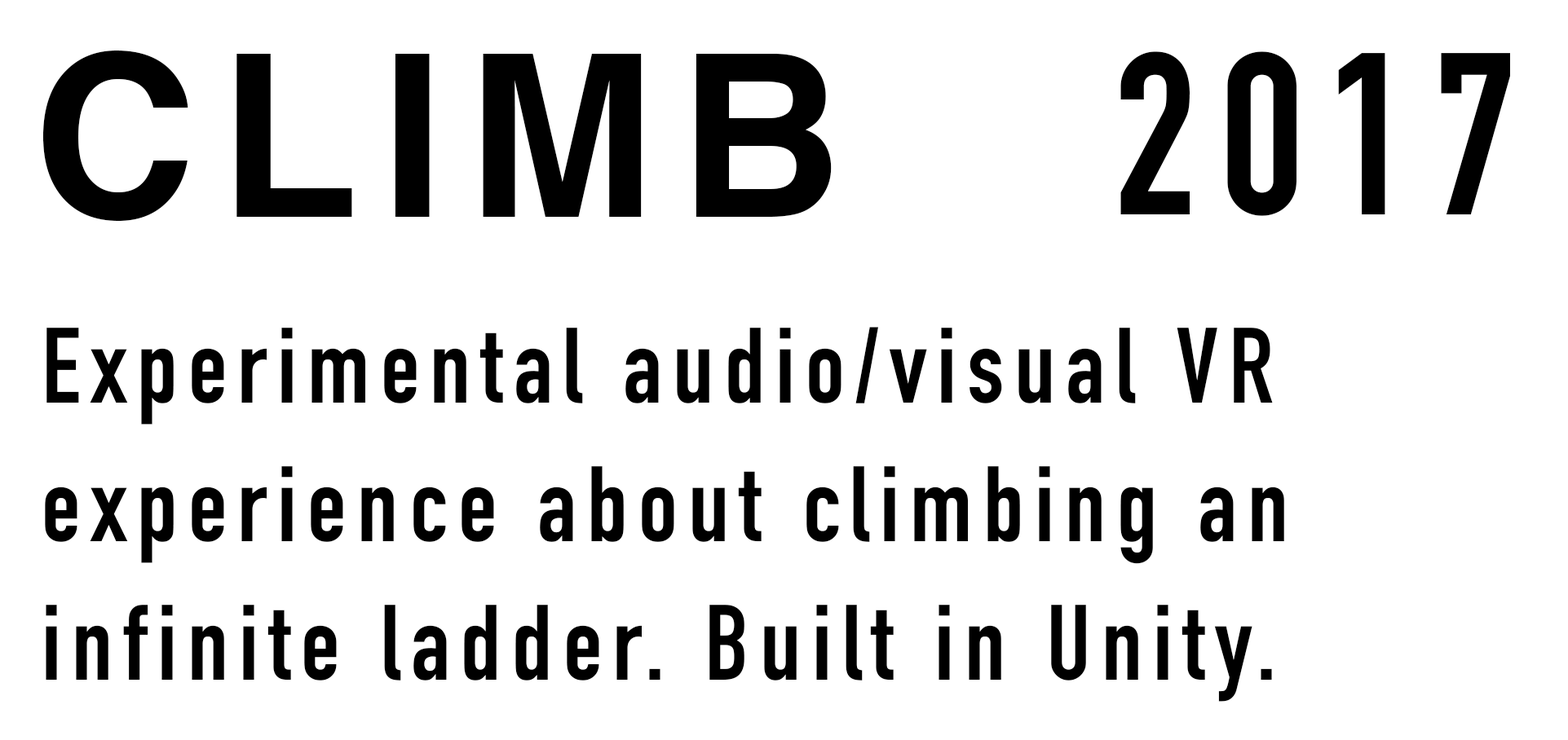
<style>
.page{position:relative;width:1568px;height:740px;background:#ffffff}
.page>*{position:absolute;margin:0}
.t1{font:226.9px "Helvetica-Bold";letter-spacing:0.1em;color:#000000}
.t2{font:226.3px "DINCondensed-Bold";letter-spacing:0.1em;color:#000000}
.t3{font:105.3px/138.6px "DINCondensed-Bold";letter-spacing:0.1em;color:#000000}
</style>
<div class="page">
<p class="t1" style="left:42px;top:51px;width:790px;height:170px">CLIMB</p>
<p class="t2" style="left:1120px;top:51px;width:390px;height:165px">2017</p>
<p class="t3" style="left:45px;top:327px;width:1239px;height:375px">Experimental audio/visual VR experience about climbing an infinite ladder. Built in Unity.</p>
</div>
